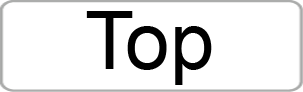
<style>
.page{position:relative;width:303px;height:92px;background:#ffffff}
.page>*{position:absolute;margin:0}
.t1{font:80px "ArialMT";color:#000000}
</style>
<div class="page">
<p class="t1" style="left:86px;top:11px;width:126px;height:74px">Top</p>
</div>
